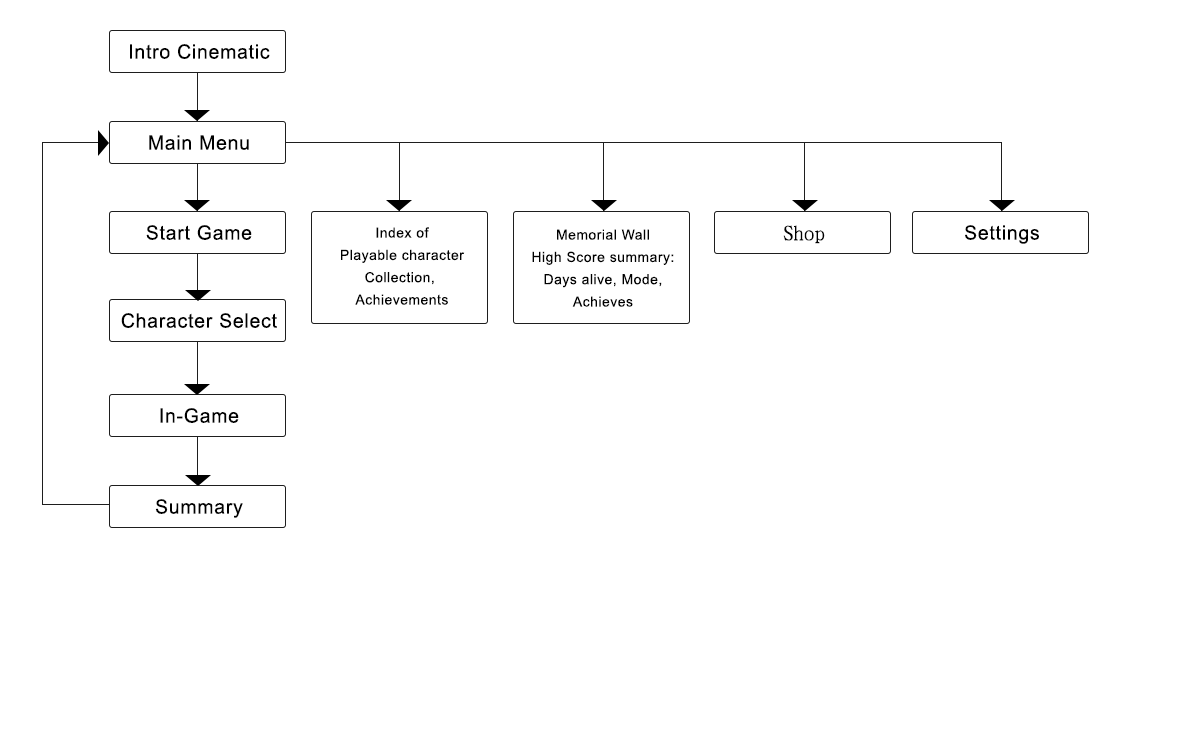
<style>
.page{position:relative;width:1197px;height:741px;background:#ffffff}
.page>*{position:absolute;margin:0}
.t1{font:19.7px "ArialMT";letter-spacing:0.04em;color:#000000}
.t2{font:14px/22.3px "ArialMT";letter-spacing:0.04em;color:#000000}
.t3{font:19.7px "DFKaiShu-SB-Estd-BF";letter-spacing:0.04em;color:#000000}
</style>
<div class="page">
<p class="t1" style="left:130px;top:44px;width:140px;height:15px">Intro Cinematic</p>
<p class="t1" style="left:149px;top:135px;width:100px;height:15px">Main Menu</p>
<p class="t1" style="left:146px;top:225px;width:106px;height:15px">Start Game</p>
<p class="t2" style="left:341px;top:227px;width:124px;height:78px;text-align:center">Index of<br>Playable character<br>Collection, <br>Achievements</p>
<p class="t2" style="left:532px;top:229px;width:142px;height:78px;text-align:center">Memorial Wall<br>High Score summary:<br>Days alive, Mode,<br>Achieves</p>
<p class="t3" style="left:783px;top:225px;width:42px;height:19px">Shop</p>
<p class="t1" style="left:965px;top:225px;width:74px;height:19px">Settings</p>
<p class="t1" style="left:121px;top:313px;width:156px;height:15px">Character Select</p>
<p class="t1" style="left:160px;top:408px;width:79px;height:15px">In-Game</p>
<p class="t1" style="left:155px;top:499px;width:88px;height:19px">Summary</p>
</div>
